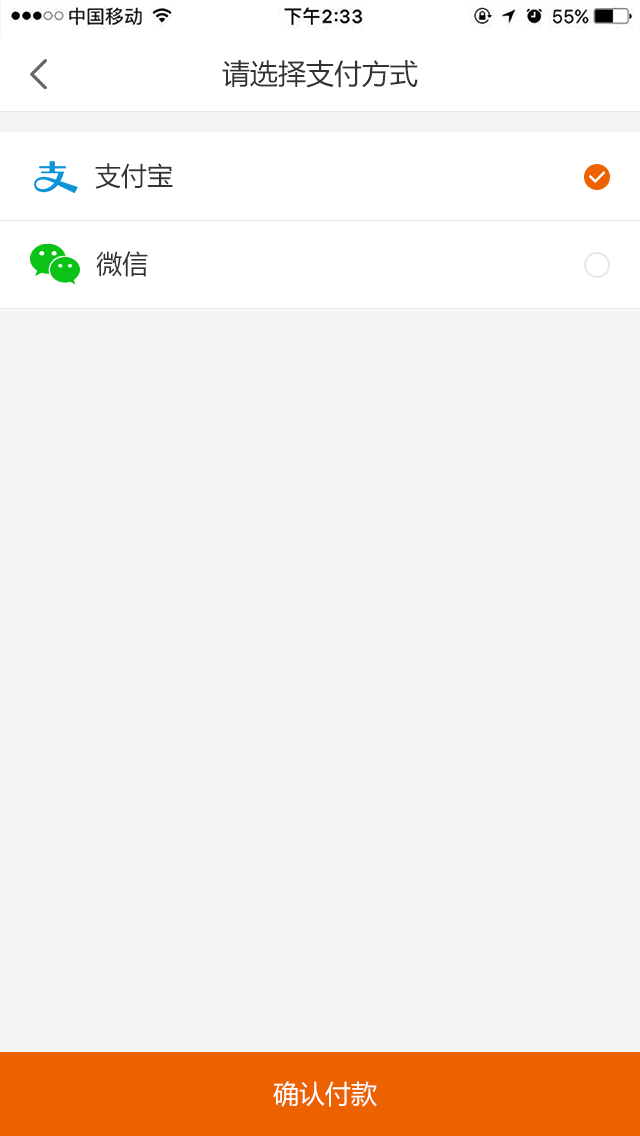
<style>
.page{position:relative;width:640px;height:1136px;background:#f5f5f5}
.page>*{position:absolute;margin:0}
.t1{font:28px "MicrosoftYaHei";color:#333333}
.t2{font:26px "MicrosoftYaHei";color:#333333}
.t3{font:26px "MicrosoftYaHei";color:#ffffff}
</style>
<div class="page">
<p class="t1" style="left:222px;top:60px;width:196px;height:28px">请选择支付方式</p>
<p class="t2" style="left:95px;top:163px;width:78px;height:26px">支付宝</p>
<p class="t2" style="left:96px;top:251px;width:52px;height:26px">微信</p>
<p class="t3" style="left:273px;top:1081px;width:104px;height:26px">确认付款</p>
</div>
